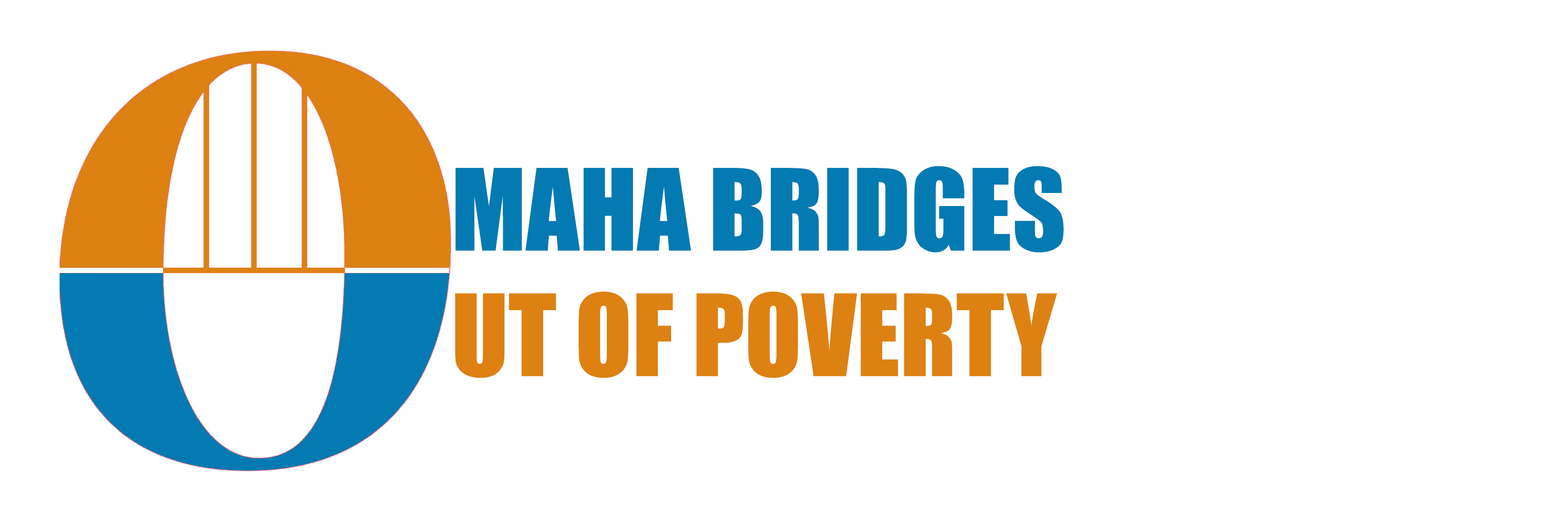
<style>
.page{position:relative;width:1568px;height:523px;background:#ffffff}
.page>*{position:absolute;margin:0}
.t1{font:104.5px "Impact";color:#dd8112}
.t2{font:104.5px "Impact";color:#037ab2}
</style>
<div class="page">
<p class="t1" style="left:455px;top:166px;width:609px;height:212px"><span class="t2">MAHA BRIDGES<br></span>UT OF POVERTY</p>
</div>
